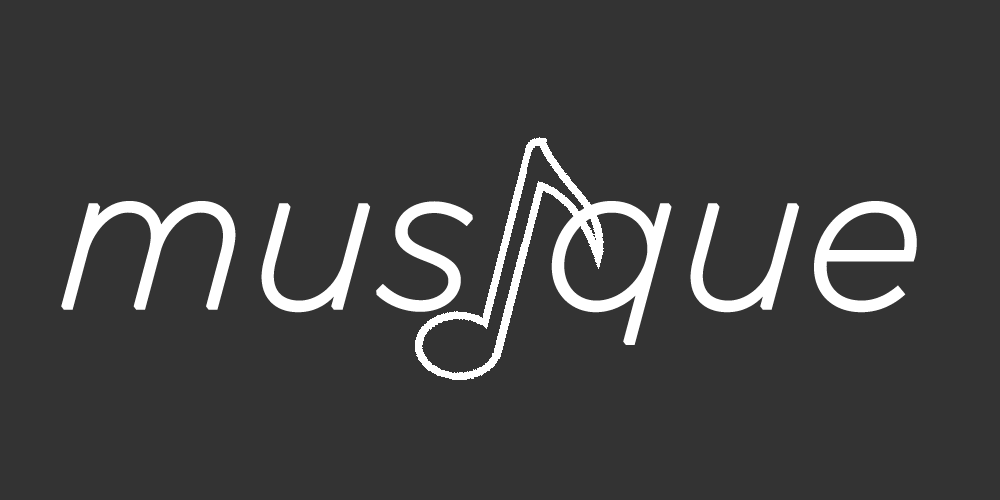
<style>
.page{position:relative;width:1000px;height:500px;background:#333333}
.page>*{position:absolute;margin:0}
.t1{font:200px "Gotham-XLightItalic";color:#ffffff;font-weight:bold}
</style>
<div class="page">
<p class="t1" style="left:61px;top:201px;width:856px;height:144px">mus que</p>
</div>
